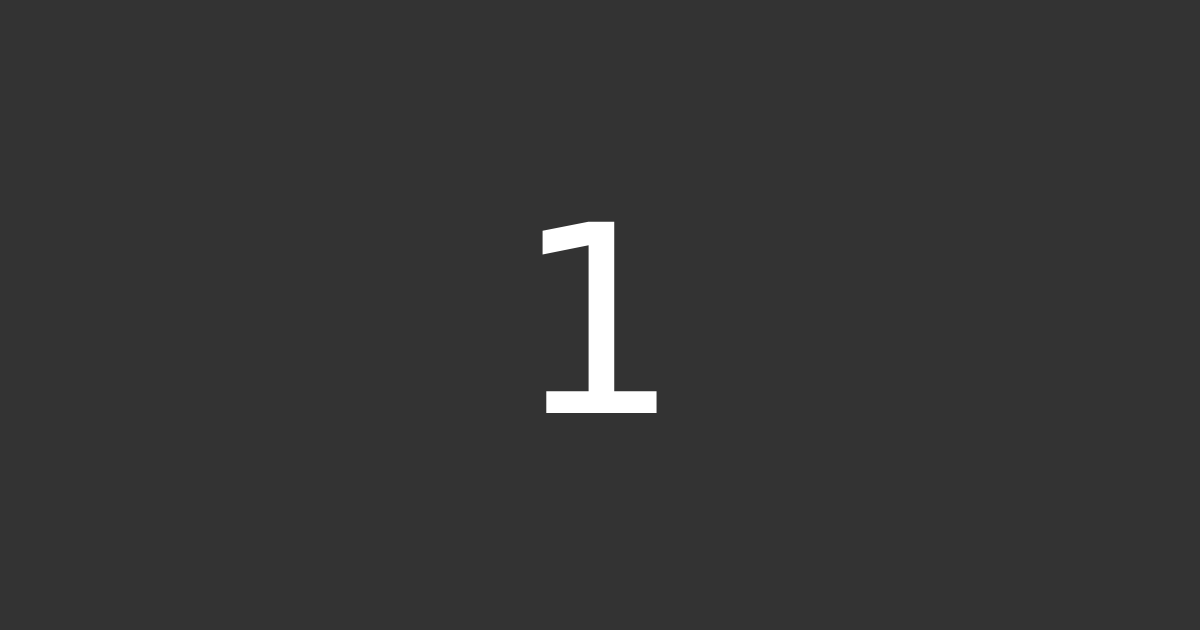
<style>
.page{position:relative;width:1200px;height:630px;background:#333333}
.page>*{position:absolute;margin:0}
.t1{font:262.5px "DejaVuSans";color:#ffffff}
</style>
<div class="page">
<p class="t1" style="left:542px;top:221px;width:115px;height:192px">1</p>
</div>
